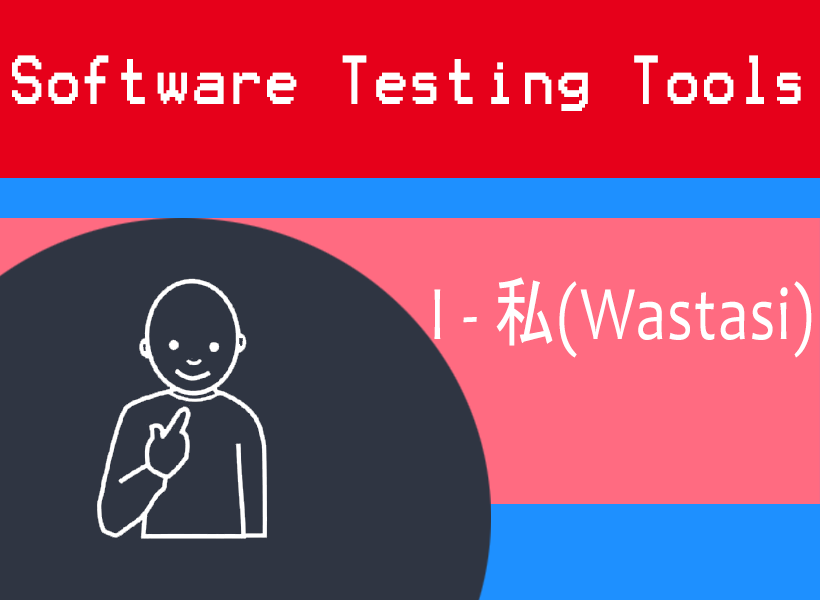
<style>
.page{position:relative;width:820px;height:600px;background:#2f3542}
.page>*{position:absolute;margin:0}
.t1{font:55.5px "Terminal";letter-spacing:0.025em;color:#ffffff;scale:0.85 1}
.t2{font:77.9px "Candara";letter-spacing:0.025em;color:#ffffff;scale:0.79 1}
.t3{font:77.9px "MS-Gothic";letter-spacing:0.025em;color:#ffffff;scale:0.79 1}
</style>
<div class="page">
<p class="t1" style="left:12px;top:55px;width:789px;height:56px">Software Testing Tools</p>
<p class="t2" style="left:434px;top:277px;width:378px;height:81px">I - <span class="t3">私</span>(Wastasi)</p>
</div>
